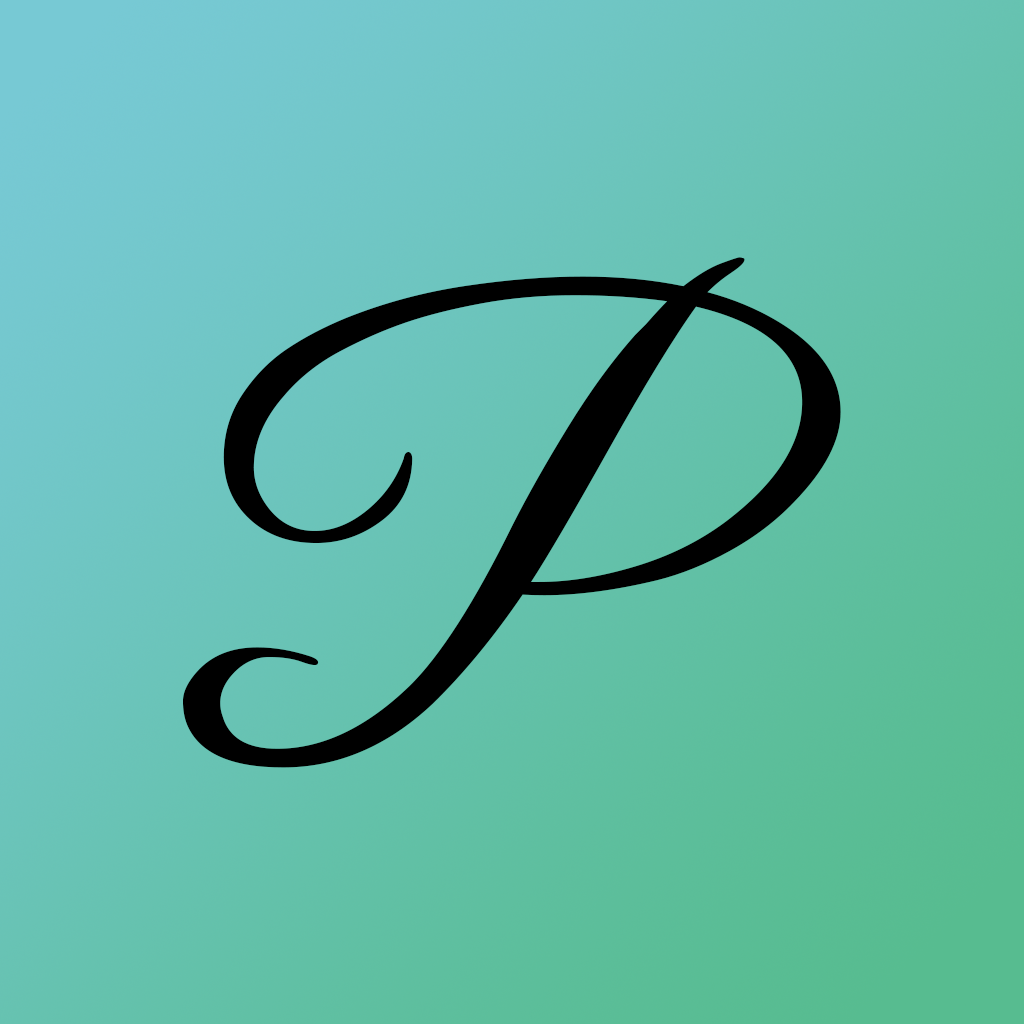
<style>
.page{position:relative;width:1024px;height:1024px}
.page>*{position:absolute;margin:0}
.t1{font:600px "GreatVibes-Regular";color:#000000}
</style>
<div class="page">
<p class="t1" style="left:183px;top:257px;width:658px;height:511px">P</p>
</div>
